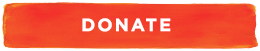
<style>
.page{position:relative;width:260px;height:51px}
.page>*{position:absolute;margin:0}
.t1{font:18px "Gotham-Bold";letter-spacing:0.111em;color:#ffffff}
</style>
<div class="page">
<p class="t1" style="left:82px;top:18px;width:89px;height:14px">DONATE</p>
</div>
